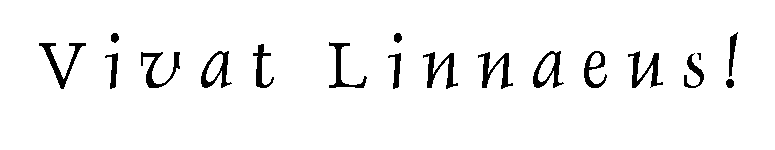
<style>
.page{position:relative;width:775px;height:150px;background:#ffffff}
.page>*{position:absolute;margin:0}
.t1{font:75px "DauphinPlain";color:#010101}
</style>
<div class="page">
<p class="t1" style="left:39px;top:32px;width:699px;height:57px">V i v a t   L i n n a e u s !</p>
</div>
